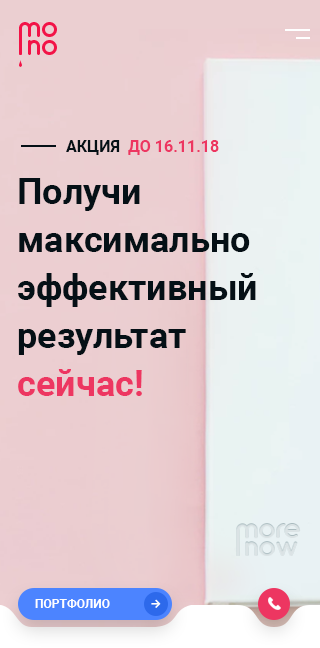
<style>
.page{position:relative;width:320px;height:648px}
.page>*{position:absolute;margin:0}
.t1{font:30px "Arciform";color:#f21347}
.t2{font:16px "Roboto-Bold";color:#ed3661;text-transform:uppercase}
.t3{font:16px "Roboto-Bold";color:#051016;text-transform:uppercase}
.t4{font:36px/48px "Roboto-Bold";color:#051016}
.t5{font:36px/48px "Roboto-Bold";color:#ed3661}
.t6{font:12px "Roboto-Bold";color:#ffffff;text-transform:uppercase}
</style>
<div class="page">
<p class="t1" style="left:19px;top:22px;width:38px;height:15px">mo</p>
<p class="t2" style="left:66px;top:140px;width:153px;height:15px"><span class="t3">Акция  </span>до 16.11.18</p>
<p class="t4" style="left:18px;top:178px;width:238px;height:218px">Получи<br>максимально<br>эффективный<br>результат<br><span class="t5">сейчас!</span></p>
<p class="t6" style="left:35px;top:599px;width:75px;height:9px">портфолио</p>
</div>
